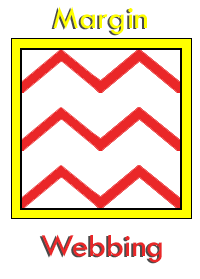
<style>
.page{position:relative;width:200px;height:279px;background:#ffffff}
.page>*{position:absolute;margin:0}
.t1{font:33.3px "TwCenMT-Regular";color:#ffff00}
.t2{font:33.3px "TwCenMT-Regular";color:#ea2728}
</style>
<div class="page">
<p class="t1" style="left:53px;top:6px;width:94px;height:29px">Margin</p>
<p class="t2" style="left:41px;top:234px;width:121px;height:29px">Webbing</p>
</div>
